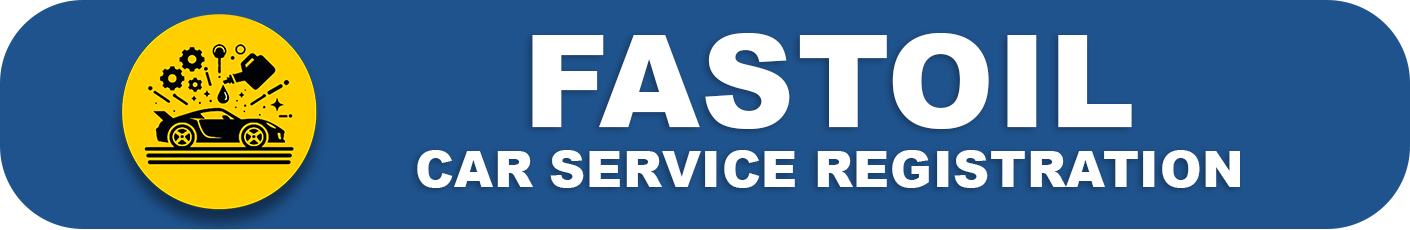
<style>
.page{position:relative;width:1410px;height:230px;background:#1f538d}
.page>*{position:absolute;margin:0}
.t1{font:50px "Arial-Black";letter-spacing:-0.02em;color:#ffffff;text-transform:uppercase}
.t2{font:129.2px "Arial-Black";letter-spacing:-0.02em;color:#ffffff;text-transform:uppercase}
</style>
<div class="page">
<p class="t1" style="left:417px;top:33px;width:823px;height:155px;text-align:center"><span class="t2">fastoil<br></span>car service registration</p>
</div>
